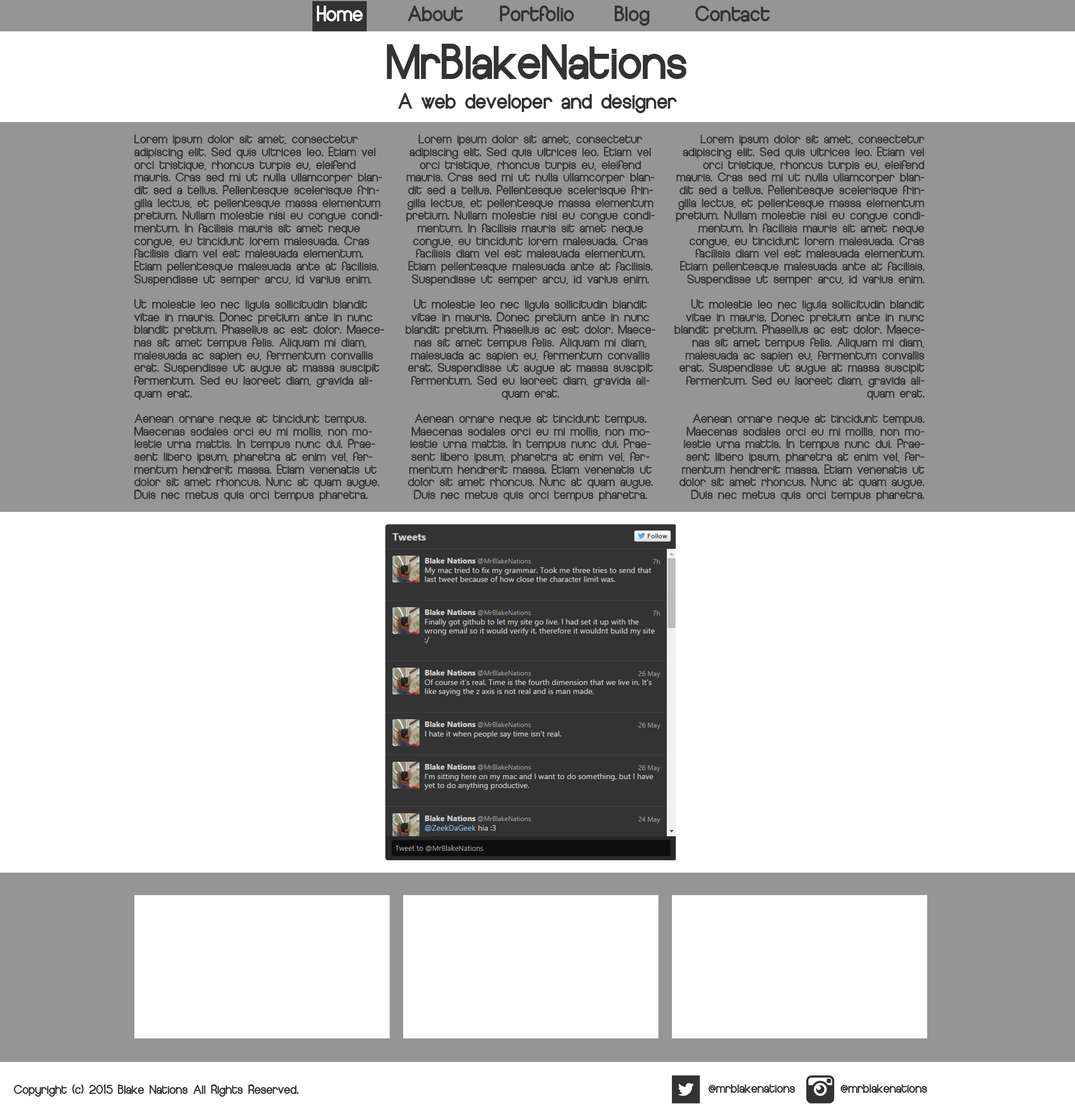
<style>
.page{position:relative;width:1075px;height:1109px;background:#ffffff}
.page>*{position:absolute;margin:0}
.t1{font:17.9px "EuropeUnderground";color:#ffffff}
.t2{font:17.9px "EuropeUnderground";color:#333333}
.t3{font:40.3px "EuropeUnderground";color:#333333}
.t4{font:10.6px "EuropeUnderground";color:#333333}
</style>
<div class="page">
<p class="t1" style="left:317px;top:6px;width:46px;height:15px">Home</p>
<p class="t1" style="left:317px;top:6px;width:46px;height:15px">Home</p>
<p class="t2" style="left:408px;top:6px;width:55px;height:15px">About</p>
<p class="t2" style="left:500px;top:6px;width:74px;height:15px">Portfolio</p>
<p class="t2" style="left:615px;top:6px;width:35px;height:20px">Blog</p>
<p class="t2" style="left:696px;top:6px;width:74px;height:16px">Contact</p>
<p class="t3" style="left:387px;top:44px;width:300px;height:36px">MrBlakeNations</p>
<p class="t2" style="left:398px;top:93px;width:279px;height:20px">A web developer and designer</p>
<p class="t4" style="left:134px;top:134px;width:250px;height:367px">Lorem ipsum dolor sit amet, consectetur adipiscing elit. Sed quis ultrices leo. Etiam vel orci tristique, rhoncus turpis eu, eleifend mauris. Cras sed mi ut nulla ullamcorper blandit sed a tellus. Pellentesque scelerisque fringilla lectus, et pellentesque massa elementum pretium. Nullam molestie nisi eu congue condimentum. In facilisis mauris sit amet neque congue, eu tincidunt lorem malesuada. Cras facilisis diam vel est malesuada elementum. Etiam pellentesque malesuada ante at facilisis. Suspendisse ut semper arcu, id varius enim.<br><br>Ut molestie leo nec ligula sollicitudin blandit vitae in mauris. Donec pretium ante in nunc blandit pretium. Phasellus ac est dolor. Maecenas sit amet tempus felis. Aliquam mi diam, malesuada ac sapien eu, fermentum convallis erat. Suspendisse ut augue at massa suscipit fermentum. Sed eu laoreet diam, gravida aliquam erat.<br><br>Aenean ornare neque at tincidunt tempus. Maecenas sodales orci eu mi mollis, non molestie urna mattis. In tempus nunc dui. Praesent libero ipsum, pharetra at enim vel, fermentum hendrerit massa. Etiam venenatis ut dolor sit amet rhoncus. Nunc at quam augue. Duis nec metus quis orci tempus pharetra.</p>
<p class="t4" style="left:405px;top:134px;width:251px;height:367px;text-align:center">Lorem ipsum dolor sit amet, consectetur adipiscing elit. Sed quis ultrices leo. Etiam vel orci tristique, rhoncus turpis eu, eleifend mauris. Cras sed mi ut nulla ullamcorper blandit sed a tellus. Pellentesque scelerisque fringilla lectus, et pellentesque massa elementum pretium. Nullam molestie nisi eu congue condimentum. In facilisis mauris sit amet neque congue, eu tincidunt lorem malesuada. Cras facilisis diam vel est malesuada elementum. Etiam pellentesque malesuada ante at facilisis. Suspendisse ut semper arcu, id varius enim.<br><br>Ut molestie leo nec ligula sollicitudin blandit vitae in mauris. Donec pretium ante in nunc blandit pretium. Phasellus ac est dolor. Maecenas sit amet tempus felis. Aliquam mi diam, malesuada ac sapien eu, fermentum convallis erat. Suspendisse ut augue at massa suscipit fermentum. Sed eu laoreet diam, gravida aliquam erat.<br><br>Aenean ornare neque at tincidunt tempus. Maecenas sodales orci eu mi mollis, non molestie urna mattis. In tempus nunc dui. Praesent libero ipsum, pharetra at enim vel, fermentum hendrerit massa. Etiam venenatis ut dolor sit amet rhoncus. Nunc at quam augue. Duis nec metus quis orci tempus pharetra.</p>
<p class="t4" style="left:674px;top:134px;width:251px;height:367px;text-align:right">Lorem ipsum dolor sit amet, consectetur adipiscing elit. Sed quis ultrices leo. Etiam vel orci tristique, rhoncus turpis eu, eleifend mauris. Cras sed mi ut nulla ullamcorper blandit sed a tellus. Pellentesque scelerisque fringilla lectus, et pellentesque massa elementum pretium. Nullam molestie nisi eu congue condimentum. In facilisis mauris sit amet neque congue, eu tincidunt lorem malesuada. Cras facilisis diam vel est malesuada elementum. Etiam pellentesque malesuada ante at facilisis. Suspendisse ut semper arcu, id varius enim.<br><br>Ut molestie leo nec ligula sollicitudin blandit vitae in mauris. Donec pretium ante in nunc blandit pretium. Phasellus ac est dolor. Maecenas sit amet tempus felis. Aliquam mi diam, malesuada ac sapien eu, fermentum convallis erat. Suspendisse ut augue at massa suscipit fermentum. Sed eu laoreet diam, gravida aliquam erat.<br><br>Aenean ornare neque at tincidunt tempus. Maecenas sodales orci eu mi mollis, non molestie urna mattis. In tempus nunc dui. Praesent libero ipsum, pharetra at enim vel, fermentum hendrerit massa. Etiam venenatis ut dolor sit amet rhoncus. Nunc at quam augue. Duis nec metus quis orci tempus pharetra.</p>
<p class="t4" style="left:13px;top:1084px;width:286px;height:13px">Copyright (c) 2015 Blake Nations All Rights Reserved.</p>
<p class="t4" style="left:708px;top:1084px;width:87px;height:9px">@mrblakenations</p>
<p class="t4" style="left:841px;top:1084px;width:86px;height:9px">@mrblakenations</p>
</div>
